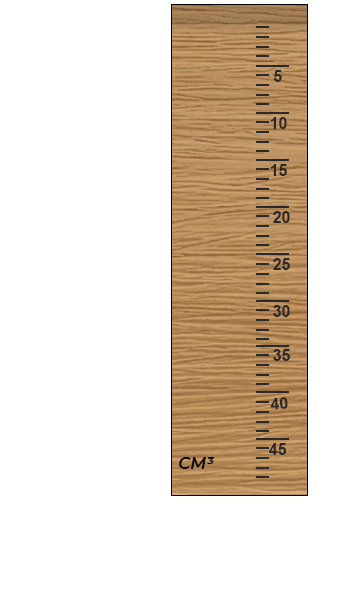
<style>
.page{position:relative;width:353px;height:611px;background:#ffffff}
.page>*{position:absolute;margin:0}
.t1{font:16.1px "Arial-BoldMT";color:#282828}
.t2{font:16.7px "Montserrat-SemiBoldItalic";color:#000000}
</style>
<div class="page">
<p class="t1" style="left:274px;top:70px;width:8px;height:12px">5</p>
<p class="t1" style="left:271px;top:117px;width:16px;height:12px">10</p>
<p class="t1" style="left:271px;top:164px;width:16px;height:12px">15</p>
<p class="t1" style="left:273px;top:211px;width:17px;height:12px">20</p>
<p class="t1" style="left:273px;top:258px;width:17px;height:12px">25</p>
<p class="t1" style="left:273px;top:305px;width:17px;height:12px">30</p>
<p class="t1" style="left:273px;top:349px;width:17px;height:12px">35</p>
<p class="t1" style="left:270px;top:397px;width:18px;height:13px;rotate:-4deg">40</p>
<p class="t1" style="left:269px;top:443px;width:18px;height:12px">45</p>
<p class="t2" style="left:179px;top:457px;width:35px;height:12px">CM³</p>
</div>
